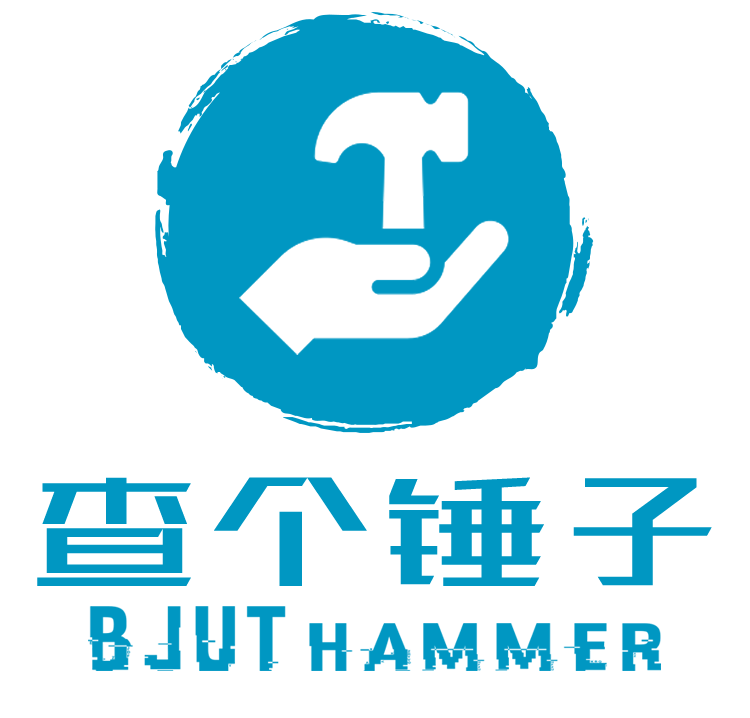
<style>
.page{position:relative;width:750px;height:718px;background:#ffffff}
.page>*{position:absolute;margin:0}
.t1{font:176px "zcool-gdh";color:#0097c2}
</style>
<div class="page">
<p class="t1" style="left:37px;top:477px;width:675px;height:109px">查个锤子</p>
</div>
